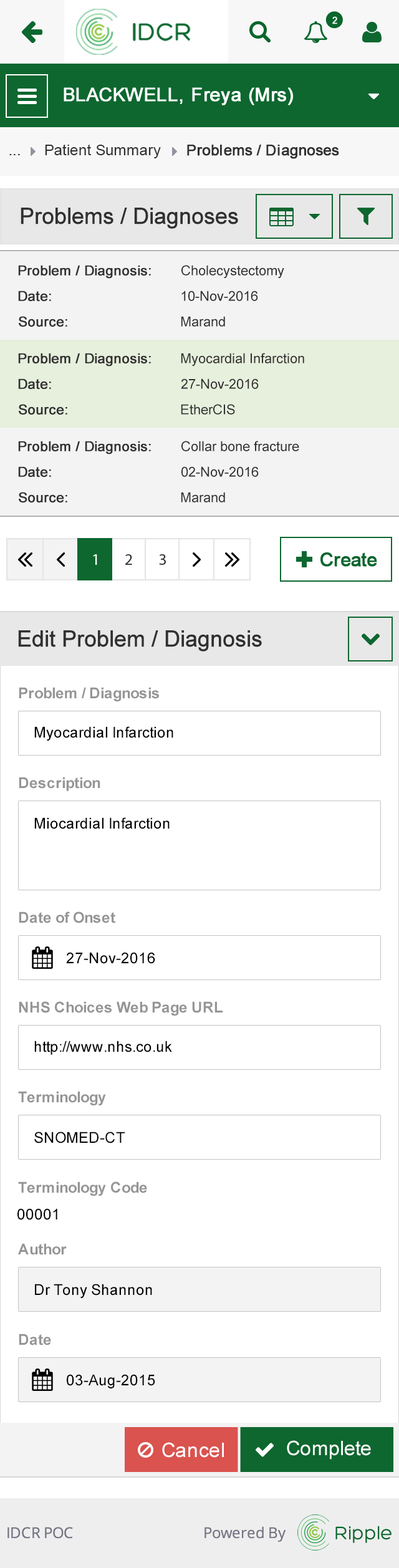
<style>
.page{position:relative;width:399px;height:1568px;background:#ffffff}
.page>*{position:absolute;margin:0}
.t1{font:15px "ArialMT";color:#313131}
.t2{font:15px "ArialMT";color:#313131;font-weight:bold}
.t3{font:22.4px "ArialMT";color:#303030;font-weight:bold}
.t4{font:13.7px "ArialMT";color:#303030;font-weight:bold}
.t5{font:13.7px "ArialMT";color:#303030}
.t6{font:15px "Arial-BoldMT";color:#959595}
.t7{font:15px "ArialMT";color:#000000}
.t8{font:20px "ArialMT";color:#ffffff}
</style>
<div class="page">
<p class="t1" style="left:45px;top:144px;width:116px;height:14px">Patient Summary</p>
<p class="t2" style="left:187px;top:145px;width:152px;height:14px">Problems / Diagnoses</p>
<p class="t1" style="left:9px;top:154px;width:11px;height:1px">...</p>
<p class="t3" style="left:21px;top:208px;width:217px;height:21px">Problems / Diagnoses</p>
<p class="t4" style="left:18px;top:265px;width:133px;height:14px">Problem / Diagnosis:</p>
<p class="t5" style="left:181px;top:265px;width:103px;height:13px">Cholecystectomy</p>
<p class="t4" style="left:18px;top:291px;width:33px;height:10px">Date:</p>
<p class="t5" style="left:181px;top:291px;width:77px;height:10px">10-Nov-2016</p>
<p class="t4" style="left:19px;top:316px;width:48px;height:11px">Source:</p>
<p class="t5" style="left:181px;top:316px;width:44px;height:11px">Marand</p>
<p class="t4" style="left:18px;top:353px;width:133px;height:14px">Problem / Diagnosis:</p>
<p class="t5" style="left:181px;top:353px;width:123px;height:13px">Myocardial Infarction</p>
<p class="t4" style="left:18px;top:378px;width:33px;height:11px">Date:</p>
<p class="t5" style="left:181px;top:378px;width:78px;height:11px">27-Nov-2016</p>
<p class="t4" style="left:19px;top:404px;width:48px;height:11px">Source:</p>
<p class="t5" style="left:181px;top:404px;width:54px;height:11px">EtherCIS</p>
<p class="t4" style="left:18px;top:441px;width:133px;height:14px">Problem / Diagnosis:</p>
<p class="t5" style="left:181px;top:441px;width:118px;height:10px">Collar bone fracture</p>
<p class="t4" style="left:18px;top:466px;width:33px;height:11px">Date:</p>
<p class="t5" style="left:181px;top:466px;width:78px;height:11px">02-Nov-2016</p>
<p class="t4" style="left:19px;top:492px;width:48px;height:11px">Source:</p>
<p class="t5" style="left:181px;top:492px;width:44px;height:11px">Marand</p>
<p class="t3" style="left:18px;top:630px;width:244px;height:22px">Edit Problem / Diagnosis</p>
<p class="t6" style="left:19px;top:687px;width:140px;height:14px">Problem / Diagnosis</p>
<p class="t7" style="left:34px;top:726px;width:139px;height:15px">Myocardial Infarction</p>
<p class="t6" style="left:19px;top:777px;width:81px;height:14px">Description</p>
<p class="t7" style="left:34px;top:817px;width:136px;height:12px">Miocardial Infarction</p>
<p class="t6" style="left:19px;top:911px;width:96px;height:12px">Date of Onset</p>
<p class="t7" style="left:66px;top:952px;width:89px;height:12px">27-Nov-2016</p>
<p class="t6" style="left:19px;top:1001px;width:204px;height:15px">NHS Choices Web Page URL</p>
<p class="t7" style="left:34px;top:1041px;width:138px;height:14px">http://www.nhs.co.uk</p>
<p class="t6" style="left:18px;top:1091px;width:88px;height:14px">Terminology</p>
<p class="t7" style="left:34px;top:1132px;width:91px;height:11px">SNOMED-CT</p>
<p class="t6" style="left:18px;top:1181px;width:129px;height:15px">Terminology Code</p>
<p class="t7" style="left:17px;top:1208px;width:40px;height:12px">00001</p>
<p class="t6" style="left:18px;top:1243px;width:49px;height:12px">Author</p>
<p class="t7" style="left:35px;top:1284px;width:117px;height:14px">Dr Tony Shannon</p>
<p class="t6" style="left:19px;top:1334px;width:32px;height:11px">Date</p>
<p class="t7" style="left:67px;top:1374px;width:88px;height:14px">03-Aug-2015</p>
<p class="t8" style="left:162px;top:1442px;width:62px;height:16px">Cancel</p>
<p class="t8" style="left:287px;top:1440px;width:84px;height:20px">Complete</p>
</div>
